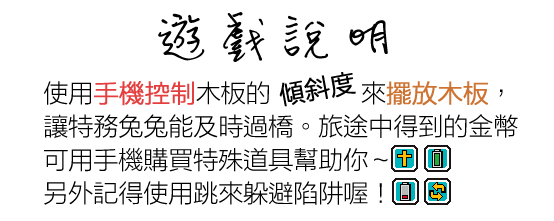
<style>
.page{position:relative;width:554px;height:221px;background:#ffffff}
.page>*{position:absolute;margin:0}
.t1{font:25px "FZLTXHB--B51-0";color:#000000;font-weight:bold}
.t2{font:25px/33.3px "FZLTXHB--B51-0";color:#000000}
.t3{font:25px/33.3px "FZLTXHB--B51-0";color:#e43f3f;font-weight:bold}
.t4{font:25px/33.3px "FZLTXHB--B51-0";color:#cd7432;font-weight:bold}
</style>
<div class="page">
<p class="t1" style="left:279px;top:72px;width:77px;height:35px;rotate:-10deg">傾斜度</p>
<p class="t2" style="left:44px;top:81px;width:474px;height:124px">使用<span class="t3">手機控制</span>木板的             來<span class="t4">擺放木板</span>，<br>讓特務兔兔能及時過橋。旅途中得到的金幣<br>可用手機購買特殊道具幫助你～       <br>另外記得使用跳來躲避陷阱喔！</p>
</div>
